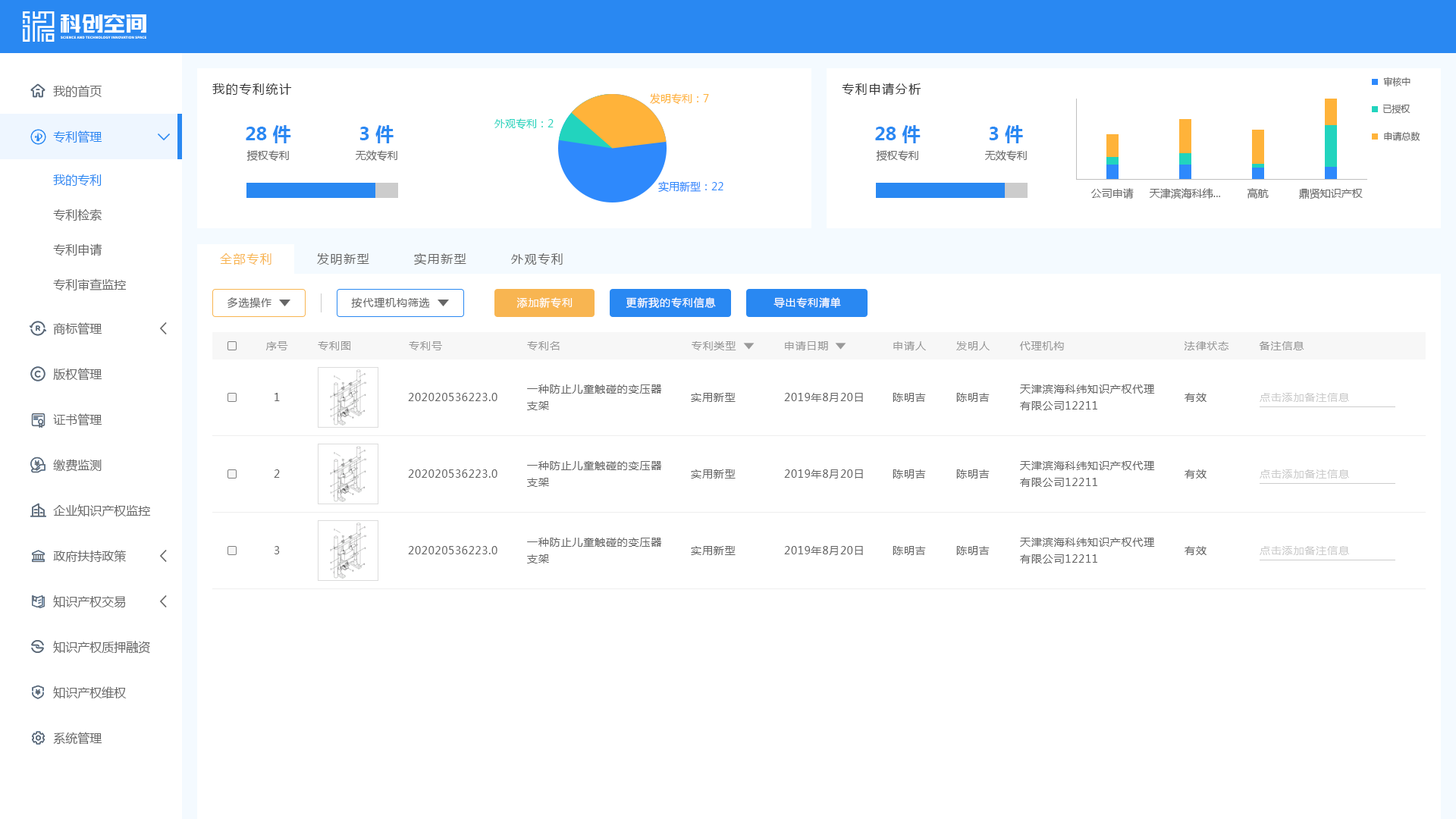
<style>
.page{position:relative;width:1456px;height:819px;background:#ffffff}
.page>*{position:absolute;margin:0}
.t1{font:9.1px "MicrosoftYaHei";color:#666666}
.t2{font:12.1px "MicrosoftYaHei";color:#666666}
.t3{font:12.1px "MicrosoftYaHei";letter-spacing:0.1em;color:#333333}
.t4{font:10.6px "MicrosoftYaHei";color:#ffb33a}
.t5{font:18.2px "MicrosoftYaHei-Bold";color:#2988f2}
.t6{font:10.6px "MicrosoftYaHei";color:#22d4be}
.t7{font:12.1px "MicrosoftYaHei";color:#2988f2}
.t8{font:10.6px "MicrosoftYaHei";color:#666666}
.t9{font:10.6px "MicrosoftYaHei";color:#2e89fc}
.t10{font:12.1px "MicrosoftYaHei";letter-spacing:0.1em;color:#f8b551}
.t11{font:12.1px "MicrosoftYaHei";letter-spacing:0.1em;color:#666666}
.t12{font:10.6px "MicrosoftYaHei";letter-spacing:0.06em;color:#666666}
.t13{font:10.6px "MicrosoftYaHei";letter-spacing:0.06em;color:#ffffff}
.t14{font:10.6px "MicrosoftYaHei";letter-spacing:0.06em;color:#999999}
.t15{font:10.6px/16.7px "MicrosoftYaHei";letter-spacing:0.06em;color:#666666}
.t16{font:10.6px "MicrosoftYaHei";letter-spacing:0.06em;color:#cccccc}
</style>
<div class="page">
<p class="t1" style="left:1383px;top:77px;width:27px;height:9px">审核中</p>
<p class="t2" style="left:53px;top:85px;width:49px;height:13px">我的首页</p>
<p class="t3" style="left:212px;top:83px;width:80px;height:13px">我的专利统计</p>
<p class="t3" style="left:842px;top:83px;width:79px;height:13px">专利申请分析</p>
<p class="t4" style="left:650px;top:93px;width:59px;height:12px">发明专利：7</p>
<p class="t1" style="left:1383px;top:104px;width:27px;height:10px">已授权</p>
<p class="t5" style="left:246px;top:125px;width:45px;height:18px">28 件</p>
<p class="t5" style="left:359px;top:125px;width:35px;height:18px">3 件</p>
<p class="t6" style="left:494px;top:118px;width:60px;height:12px">外观专利：2</p>
<p class="t5" style="left:875px;top:125px;width:46px;height:18px">28 件</p>
<p class="t5" style="left:989px;top:125px;width:34px;height:18px">3 件</p>
<p class="t7" style="left:53px;top:130px;width:49px;height:13px">专利管理</p>
<p class="t1" style="left:1384px;top:131px;width:36px;height:10px">申请总数</p>
<p class="t8" style="left:246px;top:150px;width:43px;height:12px">授权专利</p>
<p class="t8" style="left:356px;top:150px;width:41px;height:12px">无效专利</p>
<p class="t8" style="left:876px;top:150px;width:42px;height:12px">授权专利</p>
<p class="t8" style="left:985px;top:150px;width:42px;height:12px">无效专利</p>
<p class="t7" style="left:53px;top:174px;width:49px;height:12px">我的专利</p>
<p class="t9" style="left:658px;top:181px;width:65px;height:12px">实用新型：22</p>
<p class="t8" style="left:1091px;top:188px;width:43px;height:11px">公司申请</p>
<p class="t8" style="left:1149px;top:188px;width:71px;height:11px">天津滨海科纬...</p>
<p class="t8" style="left:1247px;top:188px;width:22px;height:11px">高航</p>
<p class="t8" style="left:1299px;top:188px;width:64px;height:11px">鼎贤知识产权</p>
<p class="t2" style="left:53px;top:209px;width:49px;height:12px">专利检索</p>
<p class="t2" style="left:53px;top:243px;width:49px;height:13px">专利申请</p>
<p class="t10" style="left:220px;top:253px;width:51px;height:12px">全部专利</p>
<p class="t11" style="left:317px;top:253px;width:52px;height:12px">发明新型</p>
<p class="t11" style="left:414px;top:253px;width:52px;height:12px">实用新型</p>
<p class="t11" style="left:511px;top:253px;width:52px;height:12px">外观专利</p>
<p class="t2" style="left:53px;top:278px;width:74px;height:12px">专利审查监控</p>
<p class="t12" style="left:227px;top:297px;width:44px;height:12px">多选操作</p>
<p class="t12" style="left:351px;top:297px;width:79px;height:11px">按代理机构筛选</p>
<p class="t13" style="left:516px;top:297px;width:57px;height:12px">添加新专利</p>
<p class="t13" style="left:626px;top:297px;width:90px;height:12px">更新我的专利信息</p>
<p class="t13" style="left:773px;top:297px;width:68px;height:11px">导出专利清单</p>
<p class="t2" style="left:53px;top:322px;width:49px;height:13px">商标管理</p>
<p class="t14" style="left:266px;top:341px;width:22px;height:9px">序号</p>
<p class="t14" style="left:318px;top:341px;width:32px;height:9px">专利图</p>
<p class="t14" style="left:409px;top:341px;width:33px;height:9px">专利号</p>
<p class="t14" style="left:527px;top:341px;width:33px;height:9px">专利名</p>
<p class="t14" style="left:692px;top:341px;width:44px;height:9px">专利类型</p>
<p class="t14" style="left:785px;top:341px;width:43px;height:9px">申请日期</p>
<p class="t14" style="left:893px;top:341px;width:33px;height:9px">申请人</p>
<p class="t14" style="left:956px;top:341px;width:34px;height:9px">发明人</p>
<p class="t14" style="left:1020px;top:341px;width:44px;height:9px">代理机构</p>
<p class="t14" style="left:1185px;top:341px;width:43px;height:9px">法律状态</p>
<p class="t14" style="left:1259px;top:341px;width:45px;height:9px">备注信息</p>
<p class="t2" style="left:53px;top:368px;width:49px;height:13px">版权管理</p>
<p class="t15" style="left:527px;top:384px;width:134px;height:26px">一种防止儿童触碰的变压器<br>支架</p>
<p class="t15" style="left:1020px;top:384px;width:135px;height:26px">天津滨海科纬知识产权代理<br>有限公司12211</p>
<p class="t12" style="left:275px;top:393px;width:5px;height:8px">1</p>
<p class="t12" style="left:408px;top:393px;width:89px;height:8px">202020536223.0</p>
<p class="t12" style="left:691px;top:393px;width:45px;height:9px">实用新型</p>
<p class="t12" style="left:784px;top:393px;width:79px;height:9px">2019年8月20日</p>
<p class="t12" style="left:893px;top:393px;width:33px;height:9px">陈明吉</p>
<p class="t12" style="left:956px;top:393px;width:34px;height:9px">陈明吉</p>
<p class="t12" style="left:1185px;top:393px;width:21px;height:9px">有效</p>
<p class="t16" style="left:1260px;top:393px;width:89px;height:9px">点击添加备注信息</p>
<p class="t2" style="left:53px;top:413px;width:49px;height:13px">证书管理</p>
<p class="t2" style="left:53px;top:459px;width:49px;height:13px">缴费监测</p>
<p class="t15" style="left:527px;top:461px;width:134px;height:26px">一种防止儿童触碰的变压器<br>支架</p>
<p class="t15" style="left:1020px;top:461px;width:135px;height:26px">天津滨海科纬知识产权代理<br>有限公司12211</p>
<p class="t12" style="left:274px;top:469px;width:6px;height:9px">2</p>
<p class="t12" style="left:408px;top:469px;width:89px;height:9px">202020536223.0</p>
<p class="t12" style="left:691px;top:469px;width:45px;height:10px">实用新型</p>
<p class="t12" style="left:784px;top:469px;width:79px;height:10px">2019年8月20日</p>
<p class="t12" style="left:893px;top:469px;width:33px;height:10px">陈明吉</p>
<p class="t12" style="left:956px;top:469px;width:34px;height:10px">陈明吉</p>
<p class="t12" style="left:1185px;top:469px;width:21px;height:10px">有效</p>
<p class="t16" style="left:1260px;top:469px;width:89px;height:10px">点击添加备注信息</p>
<p class="t2" style="left:53px;top:504px;width:98px;height:12px">企业知识产权监控</p>
<p class="t12" style="left:275px;top:546px;width:5px;height:8px">3</p>
<p class="t12" style="left:408px;top:546px;width:89px;height:8px">202020536223.0</p>
<p class="t15" style="left:527px;top:538px;width:134px;height:25px">一种防止儿童触碰的变压器<br>支架</p>
<p class="t12" style="left:691px;top:546px;width:45px;height:9px">实用新型</p>
<p class="t12" style="left:784px;top:546px;width:79px;height:9px">2019年8月20日</p>
<p class="t12" style="left:893px;top:546px;width:33px;height:9px">陈明吉</p>
<p class="t12" style="left:956px;top:546px;width:34px;height:9px">陈明吉</p>
<p class="t15" style="left:1020px;top:538px;width:135px;height:25px">天津滨海科纬知识产权代理<br>有限公司12211</p>
<p class="t12" style="left:1185px;top:546px;width:21px;height:9px">有效</p>
<p class="t16" style="left:1260px;top:546px;width:89px;height:9px">点击添加备注信息</p>
<p class="t2" style="left:53px;top:550px;width:73px;height:13px">政府扶持政策</p>
<p class="t2" style="left:53px;top:595px;width:73px;height:13px">知识产权交易</p>
<p class="t2" style="left:53px;top:641px;width:97px;height:13px">知识产权质押融资</p>
<p class="t2" style="left:53px;top:686px;width:74px;height:13px">知识产权维权</p>
<p class="t2" style="left:53px;top:732px;width:49px;height:13px">系统管理</p>
</div>
